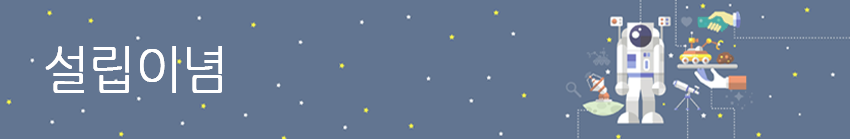
<style>
.page{position:relative;width:850px;height:139px;background:#627591}
.page>*{position:absolute;margin:0}
.t1{font:50.4px "NanumGothicLight";letter-spacing:-0.04em;color:#ffffff;font-weight:bold}
</style>
<div class="page">
<p class="t1" style="left:45px;top:46px;width:177px;height:47px">설립이념</p>
</div>
